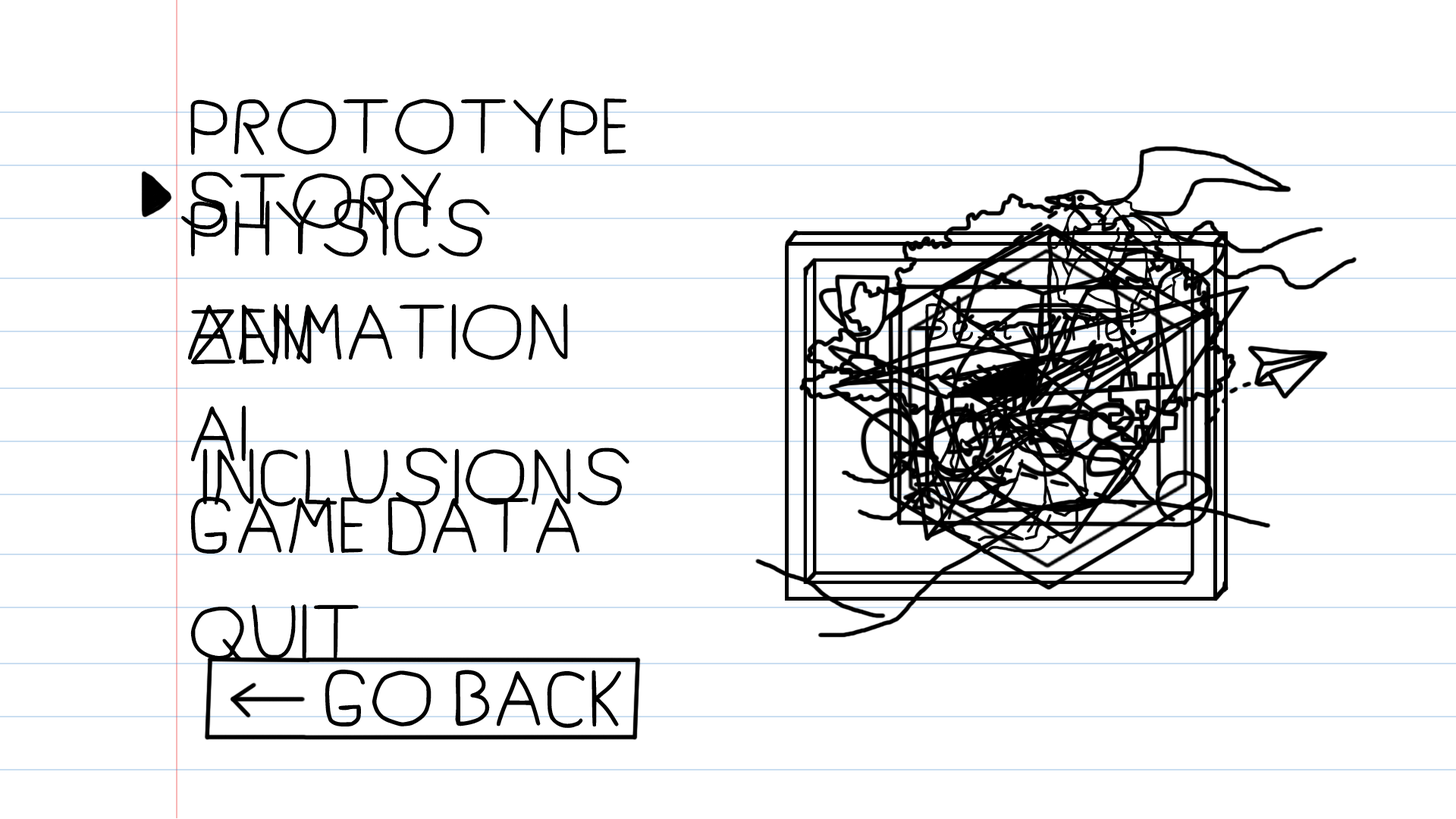
<style>
.page{position:relative;width:1456px;height:819px;background:#ffffff}
.page>*{position:absolute;margin:0}
.t1{font:68.2px "Dgeoedraw-Regular";color:#000000}
</style>
<div class="page">
<p class="t1" style="left:190px;top:98px;width:437px;height:57px">PROTOTYPE</p>
<p class="t1" style="left:181px;top:171px;width:260px;height:59px">STORY</p>
<p class="t1" style="left:190px;top:199px;width:300px;height:59px">PHYSICS</p>
<p class="t1" style="left:188px;top:303px;width:380px;height:57px">ANIMATION</p>
<p class="t1" style="left:190px;top:308px;width:122px;height:57px">ZEN</p>
<p class="t1" style="left:191px;top:406px;width:55px;height:56px">AI</p>
<p class="t1" style="left:202px;top:447px;width:427px;height:60px">INCLUSIONS</p>
<p class="t1" style="left:190px;top:497px;width:390px;height:59px">GAME DATA</p>
<p class="t1" style="left:190px;top:604px;width:169px;height:57px">QUIT</p>
</div>
